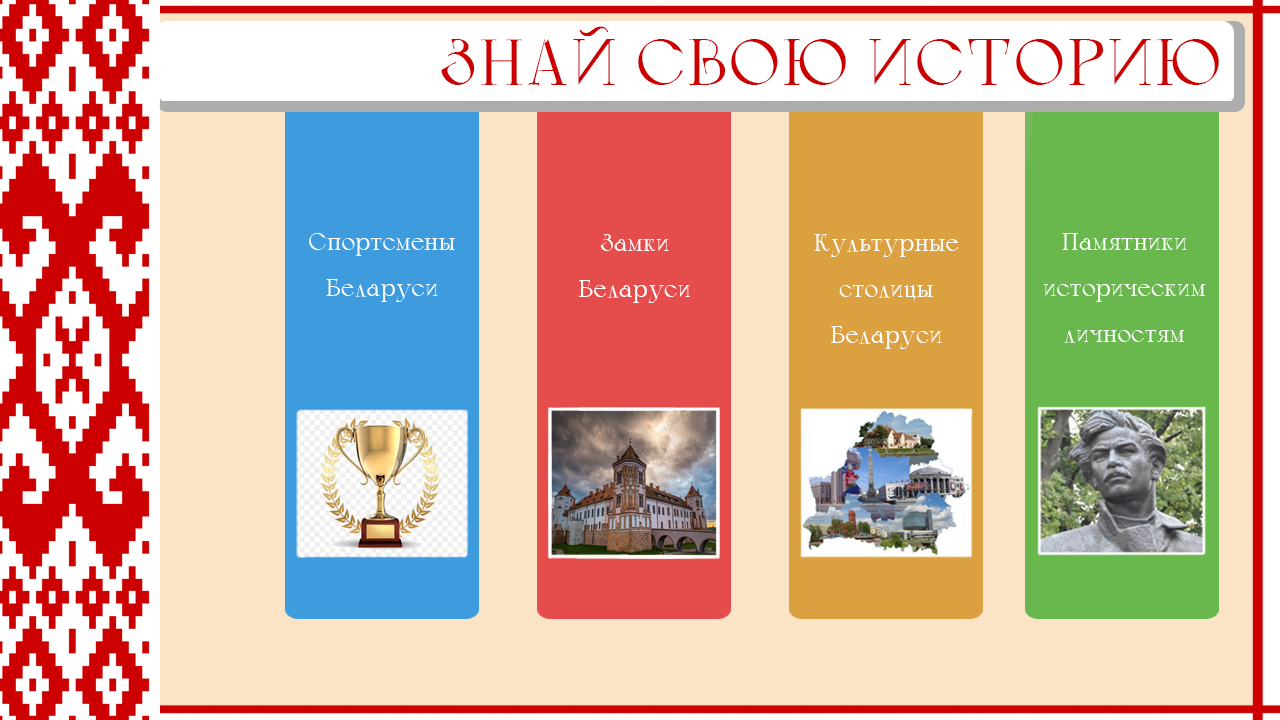
<style>
.page{position:relative;width:1280px;height:720px;background:#fae4c5}
.page>*{position:absolute;margin:0}
.t1{font:65px "Calypso-Regular";color:#cc0000}
.t2{font:24px/46px "Calypso-Regular";color:#ffffff}
</style>
<div class="page">
<p class="t1" style="left:441px;top:26px;width:778px;height:59px">ЗНАЙ СВОЮ ИСТОРИЮ</p>
<p class="t2" style="left:579px;top:234px;width:111px;height:69px;text-align:center">Замки Беларуси</p>
<p class="t2" style="left:814px;top:234px;width:144px;height:115px;text-align:center">Культурные<br>столицы<br>Беларуси</p>
</div>
